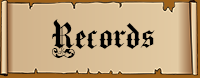
<style>
.page{position:relative;width:200px;height:78px}
.page>*{position:absolute;margin:0}
.t1{font:36.2px "MediciText";color:#000000}
</style>
<div class="page">
<p class="t1" style="left:52px;top:19px;width:103px;height:39px">Records</p>
</div>
